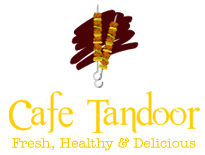
<style>
.page{position:relative;width:205px;height:155px;background:#ffffff}
.page>*{position:absolute;margin:0}
.t1{font:14px "AmerTypewriterITCbyBT-Medium";color:#fbc900}
</style>
<div class="page">
<p class="t1" style="left:12px;top:138px;width:184px;height:13px">Fresh, Healthy &amp; Delicious</p>
</div>
